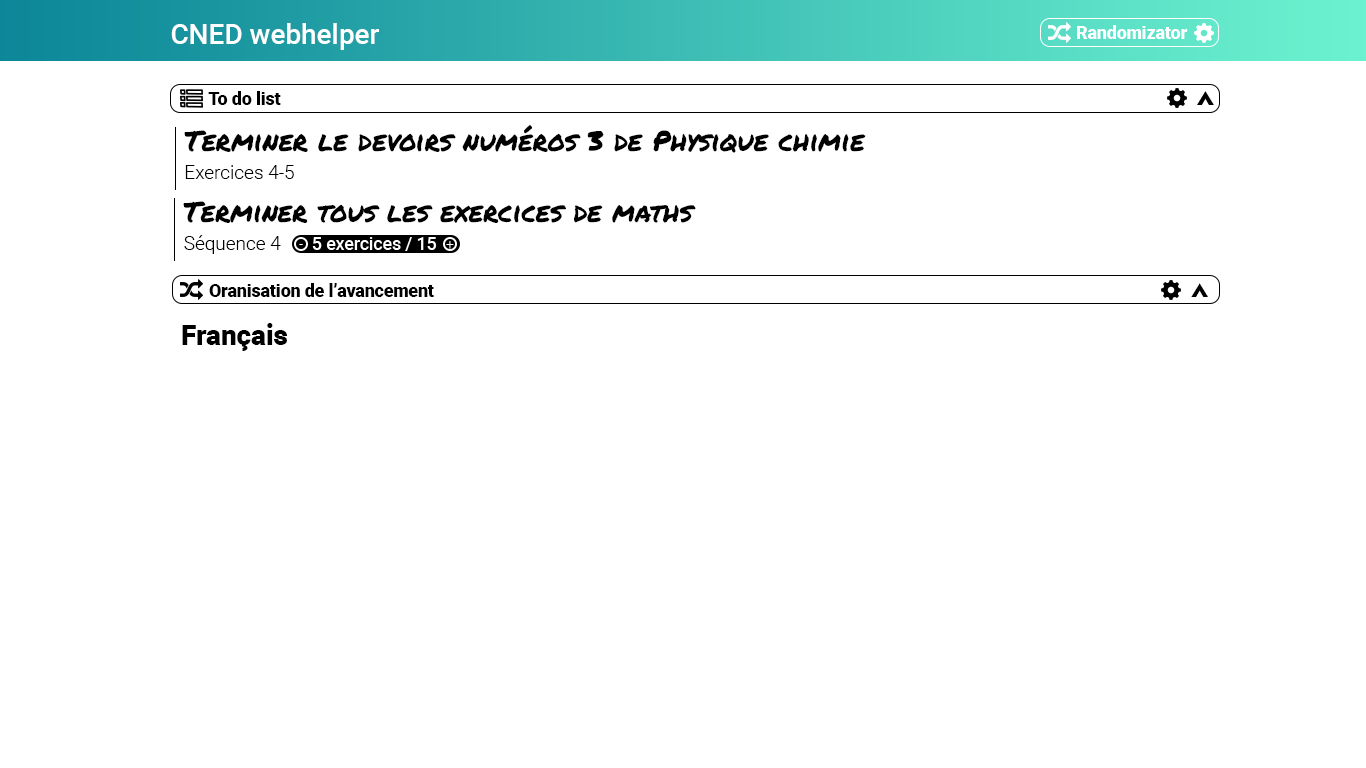
<style>
.page{position:relative;width:1366px;height:768px;background:#ffffff}
.page>*{position:absolute;margin:0}
.t1{font:28px "Roboto-Medium";color:#ffffff}
.t2{font:17.5px "Roboto-Black";color:#ffffff}
.t3{font:17.5px "Roboto-Black";color:#000000}
.t4{font:28px "PermanentMarker-Regular";color:#000000}
.t5{font:19px "Roboto-Light";color:#000000}
.t6{font:14.3px "Roboto-Light";color:#ffffff}
.t7{font:17.5px "Roboto-Medium";color:#ffffff}
.t8{font:42.4px "Bahnschrift";color:#000000}
.t9{font:28px "Roboto-Black";color:#000000}
</style>
<div class="page">
<p class="t1" style="left:171px;top:23px;width:208px;height:27px">CNED webhelper</p>
<p class="t2" style="left:1077px;top:25px;width:111px;height:14px">Randomizator</p>
<p class="t3" style="left:208px;top:91px;width:73px;height:14px">To do list</p>
<p class="t4" style="left:184px;top:124px;width:682px;height:29px">Terminer le devoirs numéros 3 de Physique chimie</p>
<p class="t5" style="left:185px;top:165px;width:109px;height:14px">Exercices 4-5</p>
<p class="t4" style="left:183px;top:201px;width:513px;height:22px">Terminer tous les exercices de maths</p>
<p class="t5" style="left:184px;top:235px;width:97px;height:19px">Séquence 4</p>
<p class="t6" style="left:299px;top:244px;width:4px;height:1px">-</p>
<p class="t7" style="left:312px;top:237px;width:125px;height:14px">5 exercices / 15</p>
<p class="t6" style="left:446px;top:241px;width:8px;height:8px">+</p>
<p class="t3" style="left:209px;top:283px;width:225px;height:14px">Oranisation de l’avancement</p>
<p class="t8" style="left:1191px;top:283px;width:17px;height:14px;rotate:-90deg">&gt;</p>
<p class="t9" style="left:182px;top:323px;width:105px;height:28px">Français</p>
</div>
